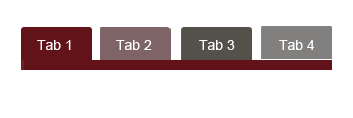
<style>
.page{position:relative;width:353px;height:118px;background:#ffffff}
.page>*{position:absolute;margin:0}
.t1{font:14px "ArialMT";color:#ffffff}
</style>
<div class="page">
<p class="t1" style="left:37px;top:40px;width:34px;height:10px">Tab 1</p>
<p class="t1" style="left:116px;top:40px;width:36px;height:10px">Tab 2</p>
<p class="t1" style="left:199px;top:40px;width:36px;height:10px">Tab 3</p>
<p class="t1" style="left:279px;top:40px;width:36px;height:10px">Tab 4</p>
</div>
